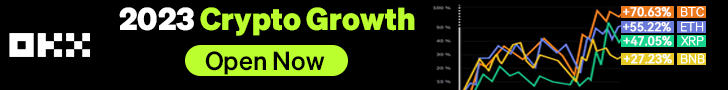
<style>
.page{position:relative;width:728px;height:90px;background:#000000}
.page>*{position:absolute;margin:0}
.t1{font:12px "HarmonyOS_Sans_SC";color:#ffffff;font-weight:bold}
.t2{font:31px "Sohne-Fett";color:#bcff2f}
.t3{font:31px "Sohne-Fett";color:#ffffff}
.t4{font:12px "Sohne-Extraleicht";color:#ffffff;font-weight:bold}
.t5{font:25.7px "Sohne-Kraftig";color:#000000}
</style>
<div class="page">
<p class="t1" style="left:623px;top:6px;width:49px;height:11px">+70.63%</p>
<p class="t2" style="left:119px;top:7px;width:296px;height:29px"><span class="t3">2023 </span>Crypto Growth</p>
<p class="t4" style="left:681px;top:7px;width:23px;height:10px">BTC</p>
<p class="t1" style="left:623px;top:21px;width:48px;height:11px">+55.22%</p>
<p class="t4" style="left:681px;top:22px;width:23px;height:10px">ETH</p>
<p class="t1" style="left:623px;top:35px;width:49px;height:11px">+47.05%</p>
<p class="t4" style="left:681px;top:36px;width:23px;height:10px">XRP</p>
<p class="t5" style="left:205px;top:51px;width:120px;height:24px">Open Now</p>
<p class="t1" style="left:623px;top:53px;width:49px;height:11px">+27.23%</p>
<p class="t4" style="left:681px;top:54px;width:24px;height:10px">BNB</p>
</div>
